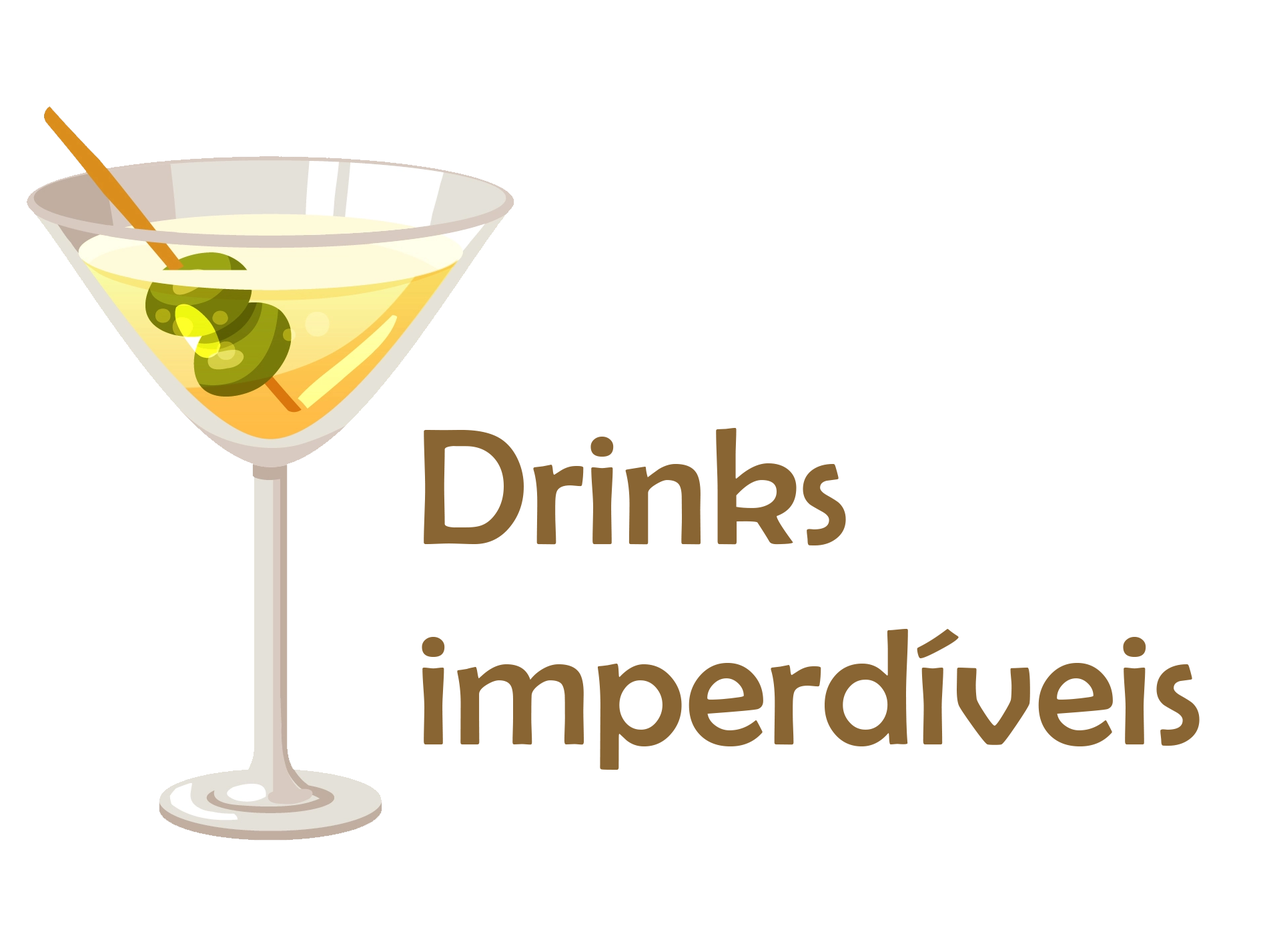
<style>
.page{position:relative;width:1261px;height:946px;background:#ffffff}
.page>*{position:absolute;margin:0}
.t1{font:166.8px "BerlinSansFB-Reg";color:#896533}
</style>
<div class="page">
<p class="t1" style="left:422px;top:428px;width:778px;height:341px">Drinks imperdíveis</p>
</div>
